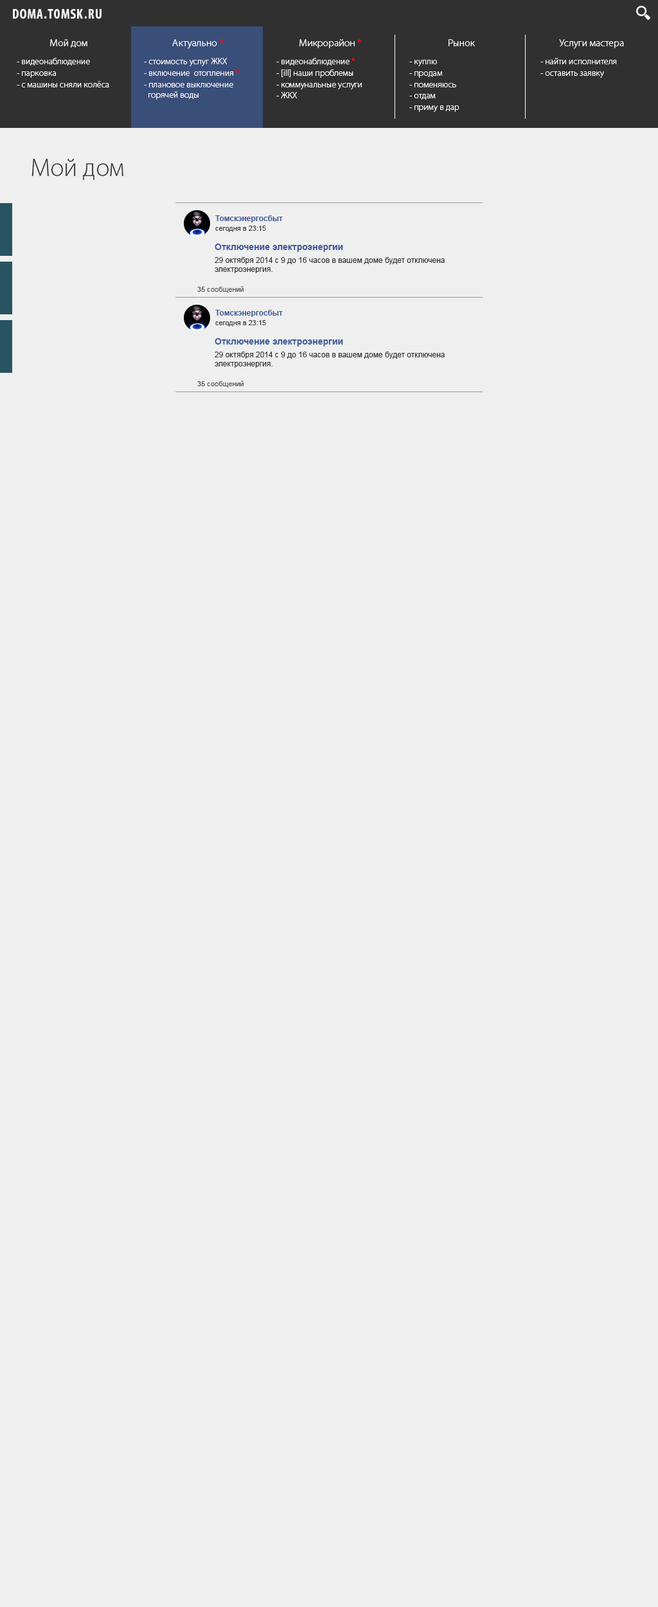
<style>
.page{position:relative;width:658px;height:1607px;background:#efefef}
.page>*{position:absolute;margin:0}
.t1{font:14.1px "MyriadPro-BoldCond";letter-spacing:0.04em;color:#f6f6f6}
.t2{font:10.3px "MyriadPro-Light";color:#ffffff}
.t3{font:10.3px "MyriadPro-Light";color:#ff0000}
.t4{font:9px "MyriadPro-Light";color:#ffffff}
.t5{font:9px "MyriadPro-Light";color:#ff0000}
.t6{font:25.7px "MyriadPro-Light";color:#333333}
.t7{font:7.7px/9.6px "Arial-BoldMT";color:#3e5b99}
.t8{font:7.1px/9.6px "ArialMT";color:#303030}
.t9{font:7.7px/12.9px "ArialMT";color:#303030}
.t10{font:9px "Arial-BoldMT";color:#3e5b99}
.t11{font:7.7px "ArialMT";color:#303030}
.t12{font:7.1px "ArialMT";color:#585858}
.t13{font:7.1px "Arial-BoldMT";color:#585858}
</style>
<div class="page">
<p class="t1" style="left:13px;top:9px;width:89px;height:10px">DOMA.TOMSK.RU</p>
<p class="t2" style="left:50px;top:39px;width:37px;height:9px">Мой дом</p>
<p class="t2" style="left:172px;top:39px;width:52px;height:10px">Актуально <span class="t3">*</span></p>
<p class="t2" style="left:300px;top:39px;width:61px;height:9px">Микрорайон <span class="t3">*</span></p>
<p class="t2" style="left:449px;top:39px;width:26px;height:7px">Рынок</p>
<p class="t2" style="left:559px;top:39px;width:65px;height:10px">Услуги мастера</p>
<p class="t4" style="left:17px;top:58px;width:92px;height:29px">- видеонаблюдение<br>- парковка<br>- с машины сняли колёса</p>
<p class="t4" style="left:144px;top:58px;width:95px;height:42px">- стоимость услуг ЖКХ<br>- включение  отопления <span class="t5">*<br></span>- плановое выключение<br>  горячей воды</p>
<p class="t4" style="left:276px;top:58px;width:86px;height:40px">- видеонаблюдение <span class="t5">*<br></span>- [ill] наши проблемы<br>- коммунальные услуги<br>- ЖКХ</p>
<p class="t4" style="left:410px;top:60px;width:50px;height:52px">- куплю<br>- продам<br>- поменяюсь<br>- отдам<br>- приму в дар</p>
<p class="t4" style="left:541px;top:58px;width:76px;height:20px">- найти исполнителя<br>- оставить заявку</p>
<p class="t6" style="left:32px;top:159px;width:91px;height:21px">Мой дом</p>
<p class="t7" style="left:215px;top:215px;width:68px;height:17px">Томскэнергосбыт<br><span class="t8">сегодня в 23:15</span></p>
<p class="t9" style="left:215px;top:244px;width:230px;height:29px"><span class="t10">Отключение электроэнергии<br></span>29 октября 2014 с 9 до 16 часов в вашем доме будет отключена <br><span class="t11">электроэнергия.</span></p>
<p class="t12" style="left:197px;top:286px;width:47px;height:7px"><span class="t13">35</span> сообщений</p>
<p class="t7" style="left:215px;top:310px;width:68px;height:17px">Томскэнергосбыт<br><span class="t8">сегодня в 23:15</span></p>
<p class="t9" style="left:215px;top:338px;width:230px;height:30px"><span class="t10">Отключение электроэнергии<br></span>29 октября 2014 с 9 до 16 часов в вашем доме будет отключена <br><span class="t11">электроэнергия.</span></p>
<p class="t12" style="left:197px;top:381px;width:47px;height:7px"><span class="t13">35</span> сообщений</p>
</div>
